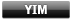
<style>
.page{position:relative;width:72px;height:20px;background:#ffffff}
.page>*{position:absolute;margin:0}
.t1{font:12px "BellGothicStd-Black";color:#ffffff}
</style>
<div class="page">
<p class="t1" style="left:24px;top:5px;width:23px;height:9px">YIM</p>
</div>
